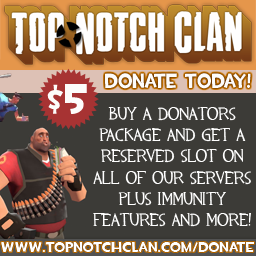
<style>
.page{position:relative;width:256px;height:256px;background:#3c3b37}
.page>*{position:absolute;margin:0}
.t1{font:20.7px "TF2Build";color:#fdfcfb;scale:0.9 1}
.t2{font:44.1px "TF2Build";color:#fdfcfb}
.t3{font:17.8px "TF2";color:#ffffff}
.t4{font:14.4px "TF2Build";color:#ffffff}
</style>
<div class="page">
<p class="t1" style="left:105px;top:73px;width:146px;height:16px">Donate Today!</p>
<p class="t2" style="left:47px;top:84px;width:40px;height:30px">$5</p>
<p class="t3" style="left:93px;top:107px;width:158px;height:120px;text-align:center">buy a donators package and get a <br>reserved slot on all of our servers plus immunity <br>features and more!</p>
<p class="t4" style="left:1px;top:242px;width:253px;height:10px">www.topnotchclan.com/donate</p>
</div>
